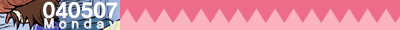
<style>
.page{position:relative;width:400px;height:30px;background:#ed6c8a}
.page>*{position:absolute;margin:0}
.t1{font:21.7px/11px "YDIYGO150-KSCPC-EUC-H";letter-spacing:-0.075em;color:#ffffff}
.t2{font:14px/11px "YDIYGO150-KSCPC-EUC-H";letter-spacing:0.24em;color:#ffffff}
</style>
<div class="page">
<p class="t1" style="left:43px;top:1px;width:75px;height:30px;text-align:center">040507<br><span class="t2">Monday</span></p>
</div>
